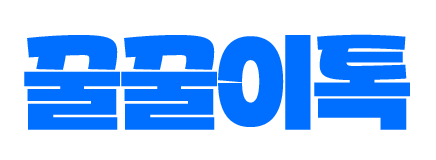
<style>
.page{position:relative;width:436px;height:160px;background:#ffffff}
.page>*{position:absolute;margin:0}
.t1{font:102px "Partial-Sans-KR";color:#006fff;scale:0.86 1}
</style>
<div class="page">
<p class="t1" style="left:24px;top:34px;width:386px;height:96px">꿀꿀이톡</p>
</div>
